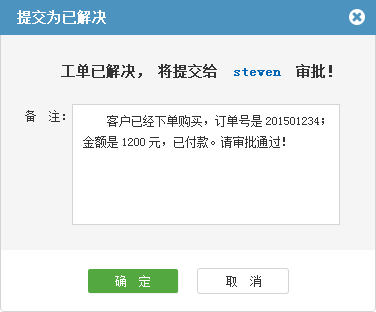
<style>
.page{position:relative;width:376px;height:312px;background:#ffffff}
.page>*{position:absolute;margin:0}
.t1{font:14px "SimSun";color:#ffffff;font-weight:bold}
.t2{font:14px "SimSun";color:#333333;font-weight:bold}
.t3{font:14px "SimSun";color:#0068b7;font-weight:bold}
.t4{font:12px "SimSun";color:#333333}
.t5{font:12px "SimSun";color:#ffffff}
</style>
<div class="page">
<p class="t1" style="left:17px;top:10px;width:89px;height:14px">提交为已解决</p>
<p class="t2" style="left:61px;top:64px;width:271px;height:14px">工单已解决，将提交给　<span class="t3">steven</span>　审批！</p>
<p class="t4" style="left:25px;top:110px;width:40px;height:12px">备　注：</p>
<p class="t4" style="left:83px;top:115px;width:241px;height:33px">客户已经下单购买，订单号是201501234；金额是1200元，已付款。请审批通过！</p>
<p class="t5" style="left:115px;top:275px;width:35px;height:12px">确  定</p>
<p class="t4" style="left:226px;top:275px;width:35px;height:12px">取  消</p>
</div>
